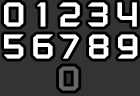
<style>
.page{position:relative;width:140px;height:96px;background:#333333}
.page>*{position:absolute;margin:0}
.t1{font:26.7px "RussellSquare";color:#ffffff;font-weight:bold;scale:1.11 1}
.t2{font:26.7px "RussellSquare";color:#666666;font-weight:bold;scale:1.11 1}
</style>
<div class="page">
<p class="t1" style="left:4px;top:2px;width:20px;height:25px">0</p>
<p class="t1" style="left:37px;top:2px;width:9px;height:25px">1</p>
<p class="t1" style="left:59px;top:2px;width:21px;height:25px">2</p>
<p class="t1" style="left:88px;top:2px;width:20px;height:25px">3</p>
<p class="t1" style="left:117px;top:2px;width:20px;height:25px">4</p>
<p class="t1" style="left:4px;top:34px;width:20px;height:25px">5</p>
<p class="t1" style="left:33px;top:34px;width:20px;height:25px">6</p>
<p class="t1" style="left:59px;top:34px;width:20px;height:25px">7</p>
<p class="t1" style="left:89px;top:34px;width:20px;height:25px">8</p>
<p class="t1" style="left:118px;top:34px;width:20px;height:25px">9</p>
<p class="t2" style="left:59px;top:66px;width:20px;height:25px">0</p>
</div>
